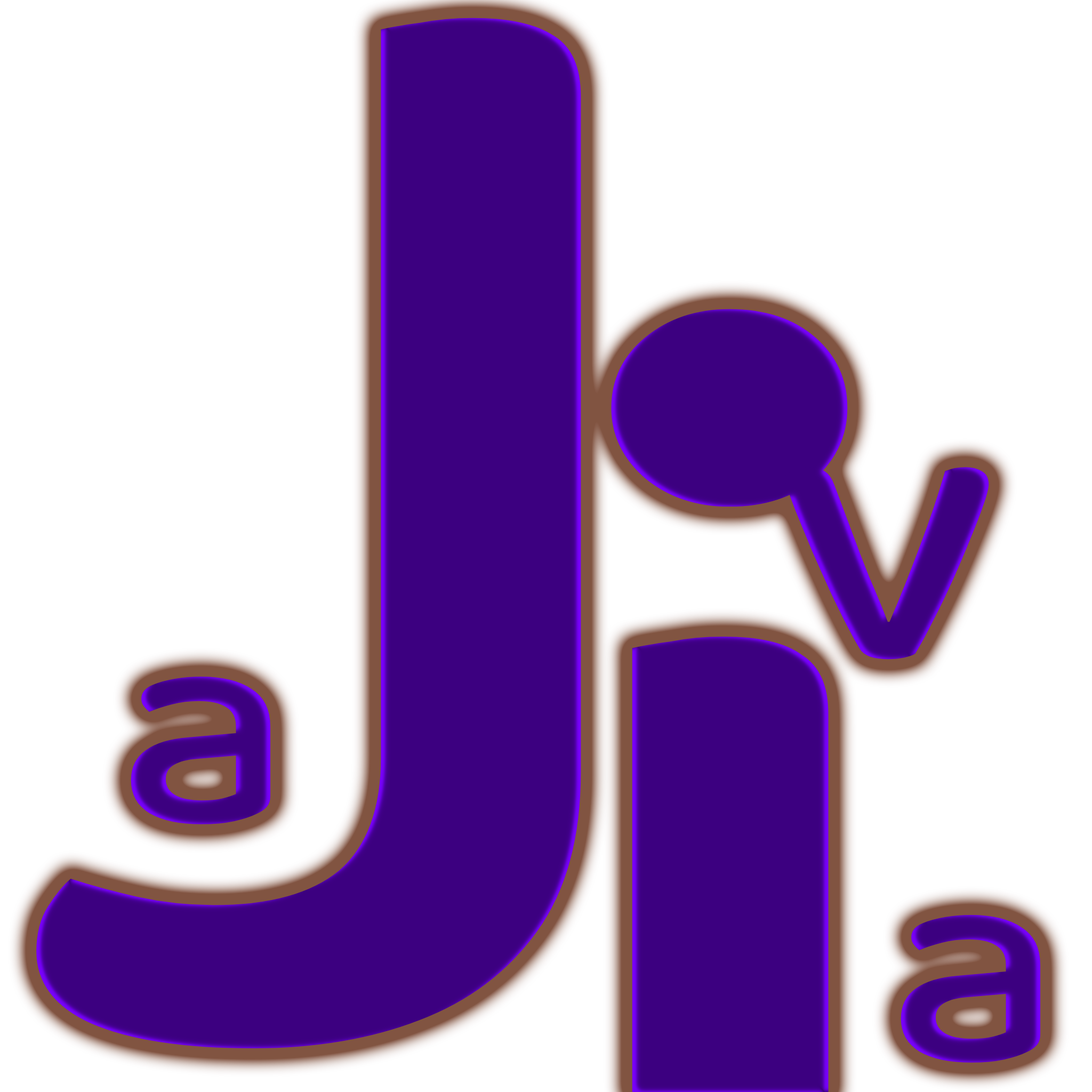
<style>
.page{position:relative;width:1092px;height:1092px;background:#ffffff}
.page>*{position:absolute;margin:0}
.t1{font:1645.9px "Baloo2-Medium";color:#3c0080;scale:1.16 1}
.t2{font:396.6px "Baloo2-Medium";color:#3c0080;scale:1.16 1}
.t3{font:297.5px "Baloo2-Medium";color:#3d0082;scale:1.16 1}
</style>
<div class="page">
<p class="t1" style="left:36px;top:18px;width:545px;height:1031px">J</p>
<p class="t2" style="left:783px;top:467px;width:206px;height:193px">v</p>
<p class="t3" style="left:131px;top:677px;width:140px;height:147px">a</p>
<p class="t3" style="left:901px;top:915px;width:140px;height:148px">a</p>
</div>
